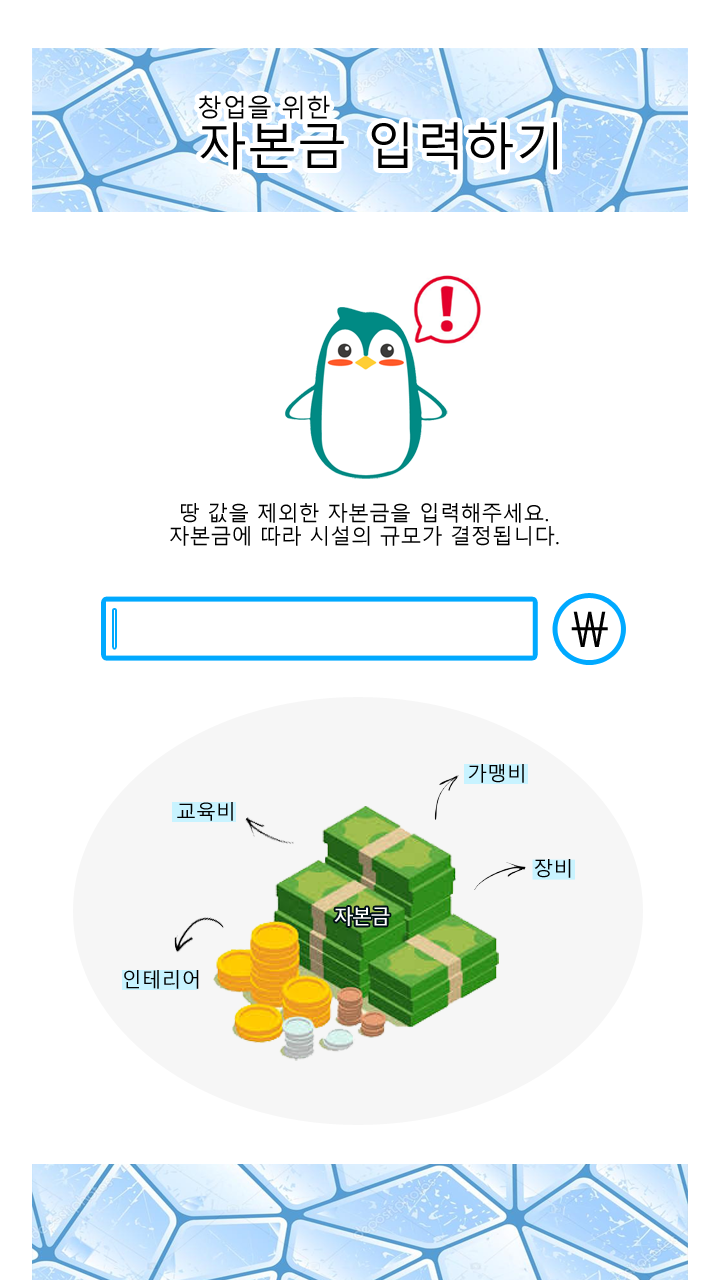
<style>
.page{position:relative;width:720px;height:1280px;background:#ffffff}
.page>*{position:absolute;margin:0}
.t1{font:50px/26px "MalgunGothic";color:#000000}
.t2{font:25px/26px "MalgunGothic";color:#000000}
.t3{font:21px/23px "MalgunGothic";color:#000000}
.t4{font:49px "MalgunGothic";color:#000000}
.t5{font:20px "MalgunGothic";color:#000000}
.t6{font:20px "MalgunGothic";letter-spacing:-0.1em;color:#ffffff;font-weight:bold}
</style>
<div class="page">
<p class="t1" style="left:198px;top:95px;width:359px;height:75px"><span class="t2">창업을 위한<br></span>자본금 입력하기</p>
<p class="t3" style="left:170px;top:503px;width:389px;height:43px;text-align:center">땅 값을 제외한 자본금을 입력해주세요.<br>자본금에 따라 시설의 규모가 결정됩니다.</p>
<p class="t4" style="left:571px;top:611px;width:37px;height:36px">\</p>
<p class="t5" style="left:468px;top:764px;width:56px;height:19px">가맹비</p>
<p class="t5" style="left:177px;top:802px;width:56px;height:19px">교육비</p>
<p class="t5" style="left:534px;top:859px;width:37px;height:19px">장비</p>
<p class="t6" style="left:334px;top:907px;width:56px;height:19px">자본금</p>
<p class="t5" style="left:124px;top:970px;width:75px;height:19px">인테리어</p>
</div>
